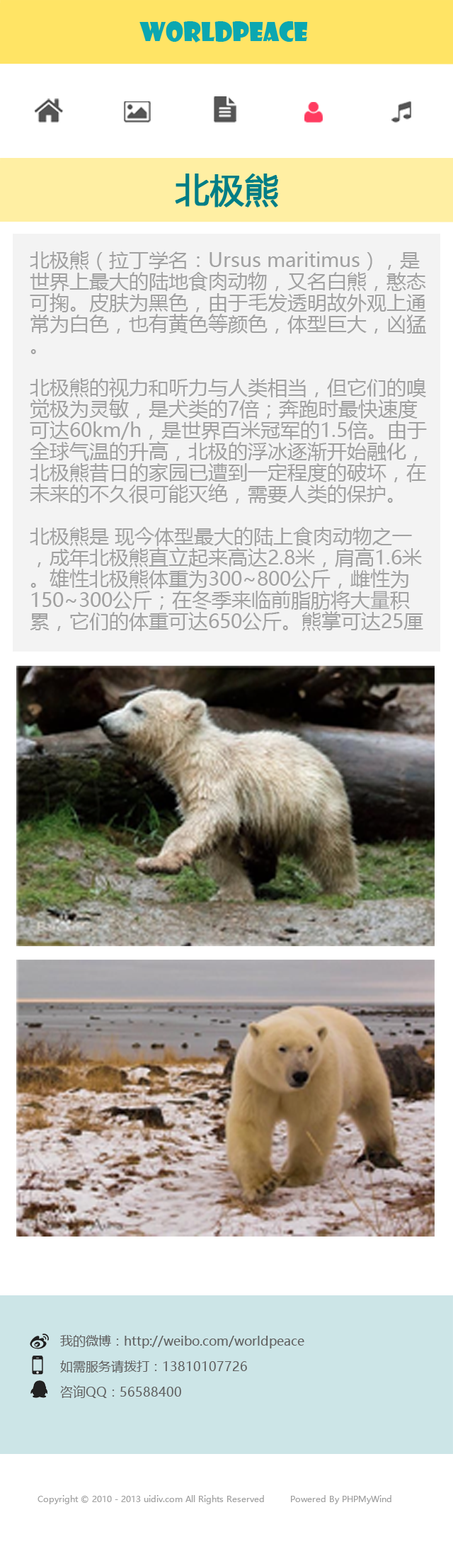
<style>
.page{position:relative;width:453px;height:1568px;background:#ffffff}
.page>*{position:absolute;margin:0}
.t1{font:25.5px "ShowcardGothic-Reg";color:#0ba7b1}
.t2{font:34px "MicrosoftYaHei";color:#007e86;font-weight:bold}
.t3{font:19.8px/21.2px "MicrosoftYaHei";color:#a1a1a1}
.t4{font:12.7px/25.5px "MicrosoftYaHei";color:#616161}
.t5{font:8.5px "MicrosoftYaHei";color:#a2a2a2}
</style>
<div class="page">
<p class="t1" style="left:140px;top:21px;width:168px;height:21px">worldpeace</p>
<p class="t2" style="left:175px;top:174px;width:103px;height:34px">北极熊</p>
<p class="t3" style="left:30px;top:251px;width:397px;height:380px">北极熊（拉丁学名：Ursus maritimus），是世界上最大的陆地食肉动物，又名白熊，憨态可掬。皮肤为黑色，由于毛发透明故外观上通常为白色，也有黄色等颜色，体型巨大，凶猛。<br><br>北极熊的视力和听力与人类相当，但它们的嗅觉极为灵敏，是犬类的7倍；奔跑时最快速度可达60km/h，是世界百米冠军的1.5倍。由于全球气温的升高，北极的浮冰逐渐开始融化，北极熊昔日的家园已遭到一定程度的破坏，在未来的不久很可能灭绝，需要人类的保护。<br><br>北极熊是 现今体型最大的陆上食肉动物之一，成年北极熊直立起来高达2.8米，肩高1.6米。雄性北极熊体重为300~800公斤，雌性为150~300公斤；在冬季来临前脂肪将大量积累，它们的体重可达650公斤。熊掌可达25厘米宽，熊爪可超过10厘米，北极熊奔跑的时速可达40公里，还能在海里以时速10公里游97公里远。</p>
<p class="t4" style="left:60px;top:1335px;width:245px;height:63px">我的微博：http://weibo.com/worldpeace            <br>如需服务请拨打：13810107726        <br>咨询QQ：56588400</p>
<p class="t5" style="left:38px;top:1495px;width:354px;height:9px">Copyright © 2010 - 2013 uidiv.com All Rights Reserved         Powered By PHPMyWind</p>
</div>
